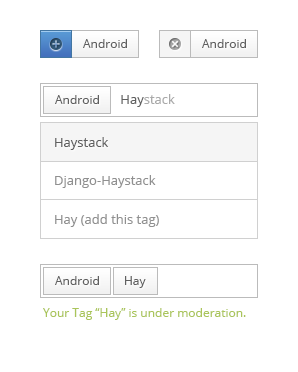
<style>
.page{position:relative;width:298px;height:372px;background:#ffffff}
.page>*{position:absolute;margin:0}
.t1{font:12px "OpenSans";color:#606060}
.t2{font:13px "OpenSans";color:#aaaaaa}
.t3{font:13px "OpenSans";color:#606060}
.t4{font:13px "OpenSans";color:#909090}
.t5{font:12px "OpenSans";color:#aac55a}
</style>
<div class="page">
<p class="t1" style="left:83px;top:39px;width:44px;height:9px">Android</p>
<p class="t1" style="left:202px;top:39px;width:44px;height:9px">Android</p>
<p class="t1" style="left:55px;top:95px;width:44px;height:9px">Android</p>
<p class="t2" style="left:121px;top:94px;width:54px;height:13px"><span class="t3">Hay</span>stack</p>
<p class="t3" style="left:55px;top:137px;width:54px;height:13px">Haystack</p>
<p class="t4" style="left:55px;top:175px;width:101px;height:13px">Django-Haystack</p>
<p class="t4" style="left:55px;top:214px;width:104px;height:13px">Hay (add this tag)</p>
<p class="t1" style="left:55px;top:276px;width:44px;height:9px">Android</p>
<p class="t1" style="left:125px;top:276px;width:21px;height:12px">Hay</p>
<p class="t5" style="left:43px;top:308px;width:203px;height:12px">Your Tag “Hay” is under moderation.</p>
</div>
